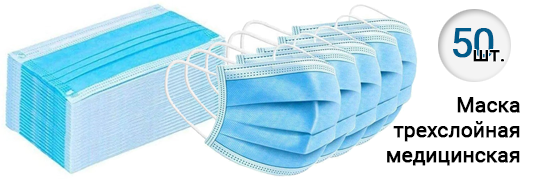
<style>
.page{position:relative;width:536px;height:185px;background:#ffffff}
.page>*{position:absolute;margin:0}
.t1{font:40px "Roboto-Regular";letter-spacing:-0.02em;color:#005b8a;font-weight:bold}
.t2{font:21px "Roboto-Regular";letter-spacing:-0.02em;color:#000000;font-weight:bold}
</style>
<div class="page">
<p class="t1" style="left:453px;top:28px;width:41px;height:30px">50</p>
<p class="t2" style="left:473px;top:50px;width:31px;height:12px">шт.</p>
<p class="t2" style="left:387px;top:97px;width:133px;height:69px;text-align:right">Маска<br>трехслойная<br>медицинская</p>
</div>
